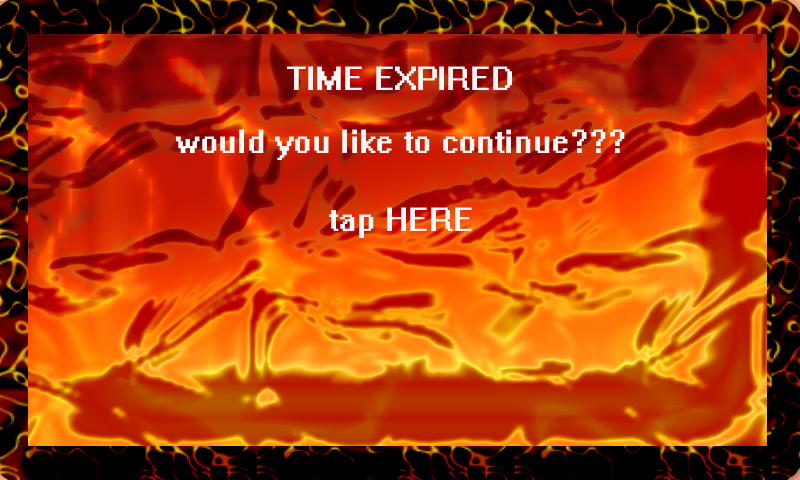
<style>
.page{position:relative;width:800px;height:480px}
.page>*{position:absolute;margin:0}
.t1{font:30px "System";color:#f8f7f7}
</style>
<div class="page">
<p class="t1" style="left:287px;top:66px;width:225px;height:24px">TIME EXPIRED</p>
<p class="t1" style="left:176px;top:129px;width:449px;height:31px">would you like to continue???</p>
<p class="t1" style="left:329px;top:207px;width:143px;height:31px">tap HERE</p>
</div>
